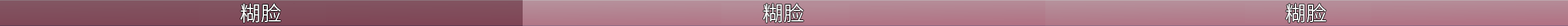
<style>
.page{position:relative;width:1568px;height:26px}
.page>*{position:absolute;margin:0}
.t1{font:20.6px "SourceHanSansSC-Normal";color:#ffffff}
</style>
<div class="page">
<p class="t1" style="left:240px;top:3px;width:41px;height:20px">糊脸</p>
<p class="t1" style="left:763px;top:3px;width:41px;height:20px">糊脸</p>
<p class="t1" style="left:1286px;top:3px;width:40px;height:20px">糊脸</p>
</div>
